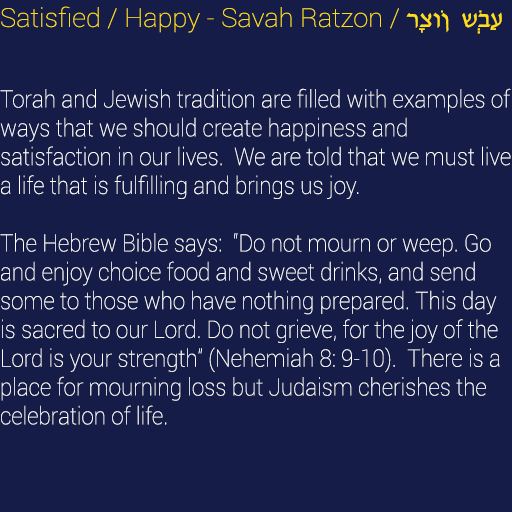
<style>
.page{position:relative;width:512px;height:512px;background:#151c47}
.page>*{position:absolute;margin:0}
.t1{font:26px "Roboto-Thin";color:#ffdd17;scale:1.04 1}
.t2{font:26px "David";color:#ffdd17;scale:1.04 1}
.t3{font:24px "Roboto-Thin";color:#ffffff;scale:0.93 1}
</style>
<div class="page">
<p class="t1" style="left:1px;top:6px;width:501px;height:28px">Satisfied / Happy - Savah Ratzon / <span class="t2">רָצוֹן  שְׂבַע</span></p>
<p class="t3" style="left:0px;top:88px;width:511px;height:337px">Torah and Jewish tradition are filled with examples of ways that we should create happiness and <br>satisfaction in our lives.  We are told that we must live a life that is fulfilling and brings us joy. <br><br>The Hebrew Bible says:  “Do not mourn or weep. Go and enjoy choice food and sweet drinks, and send some to those who have nothing prepared. This day is sacred to our Lord. Do not grieve, for the joy of the Lord is your strength” (Nehemiah 8: 9-10).  There is a place for mourning loss but Judaism cherishes the celebration of life.</p>
</div>
